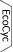
<style>
.page{position:relative;width:13px;height:52px;background:#fefefe}
.page>*{position:absolute;margin:0}
.t1{font:10px "Tahoma";letter-spacing:0.025em;color:#000000}
</style>
<div class="page">
<p class="t1" style="left:0px;top:9px;width:11px;height:33px;rotate:90deg">EcoCyc</p>
</div>
